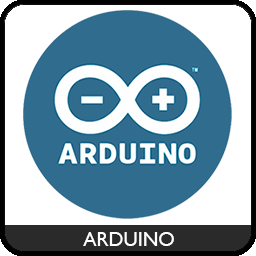
<style>
.page{position:relative;width:256px;height:256px;background:#ffffff}
.page>*{position:absolute;margin:0}
.t1{font:20px "GillSansMT";color:#ffffff}
</style>
<div class="page">
<p class="t1" style="left:83px;top:232px;width:91px;height:14px">ARDUINO</p>
</div>
